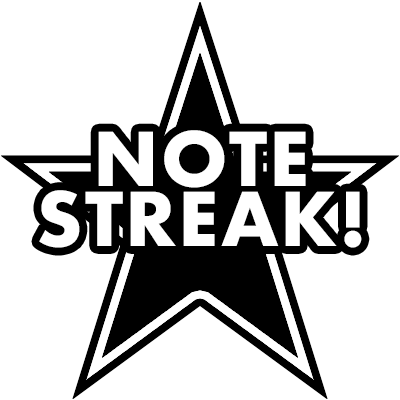
<style>
.page{position:relative;width:400px;height:400px;background:#ffffff}
.page>*{position:absolute;margin:0}
.t1{font:72px/60px "Futura-Bold";letter-spacing:0.025em;color:#ffffff}
</style>
<div class="page">
<p class="t1" style="left:39px;top:130px;width:323px;height:118px;text-align:center">NOTE<br>STREAK!</p>
</div>
